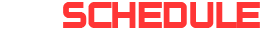
<style>
.page{position:relative;width:260px;height:32px;background:#ffffff}
.page>*{position:absolute;margin:0}
.t1{font:30px "BoomBox";color:#ff3535}
</style>
<div class="page">
<p class="t1" style="left:63px;top:2px;width:197px;height:26px">schedule</p>
</div>
